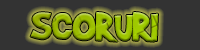
<style>
.page{position:relative;width:200px;height:50px;background:#333333}
.page>*{position:absolute;margin:0}
.t1{font:46px "Brady-Bunch"}
</style>
<div class="page">
<p class="t1" style="left:30px;top:12px;width:128px;height:30px">SCORURI</p>
</div>
